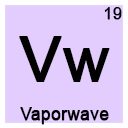
<style>
.page{position:relative;width:128px;height:128px;background:#e3cdff}
.page>*{position:absolute;margin:0}
.t1{font:16px "ArialMT";color:#000000;font-weight:bold}
.t2{font:62.3px "ArialMT";color:#000000;font-weight:bold}
.t3{font:17.9px "ArialMT";color:#000000;font-weight:bold;scale:0.96 1}
</style>
<div class="page">
<p class="t1" style="left:104px;top:7px;width:18px;height:13px">19</p>
<p class="t2" style="left:19px;top:36px;width:91px;height:46px">Vw</p>
<p class="t3" style="left:20px;top:107px;width:89px;height:18px">Vaporwave</p>
</div>
